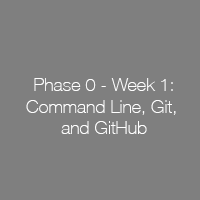
<style>
.page{position:relative;width:200px;height:200px;background:#7f7f7f}
.page>*{position:absolute;margin:0}
.t1{font:18px "HelveticaNeue-Thin";color:#ffffff}
</style>
<div class="page">
<p class="t1" style="left:26px;top:78px;width:150px;height:56px;text-align:center">Phase 0 - Week 1:<br>Command Line, Git, <br>and GitHub</p>
</div>
